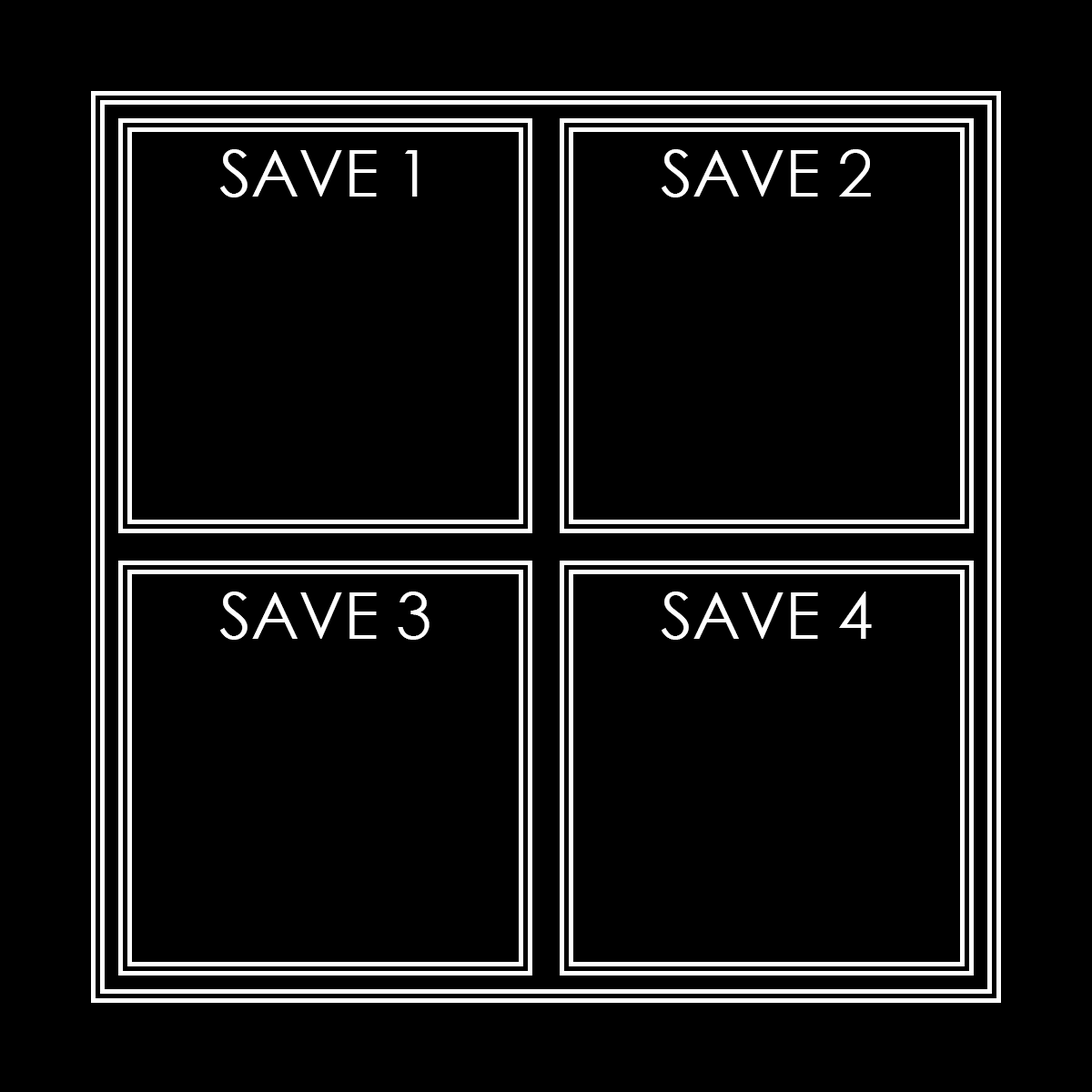
<style>
.page{position:relative;width:1092px;height:1092px;background:#000000}
.page>*{position:absolute;margin:0}
.t1{font:64.4px "CenturyGothic";color:#ffffff}
</style>
<div class="page">
<p class="t1" style="left:220px;top:149px;width:198px;height:48px">SAVE 1</p>
<p class="t1" style="left:662px;top:149px;width:209px;height:48px">SAVE 2</p>
<p class="t1" style="left:220px;top:591px;width:210px;height:49px">SAVE 3</p>
<p class="t1" style="left:662px;top:591px;width:210px;height:49px">SAVE 4</p>
</div>
